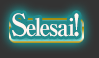
<style>
.page{position:relative;width:99px;height:58px}
.page>*{position:absolute;margin:0}
.t1{font:24px "RyuminPro-ExBold";letter-spacing:-0.08em;color:#fff5f0;scale:0.9 1}
.t2{font:30px "RyuminPro-ExBold";letter-spacing:-0.08em;color:#fff5f0;scale:0.9 1}
</style>
<div class="page">
<p class="t1" style="left:12px;top:13px;width:67px;height:24px"><span class="t2">S</span>elesai<span class="t2">!</span></p>
</div>
